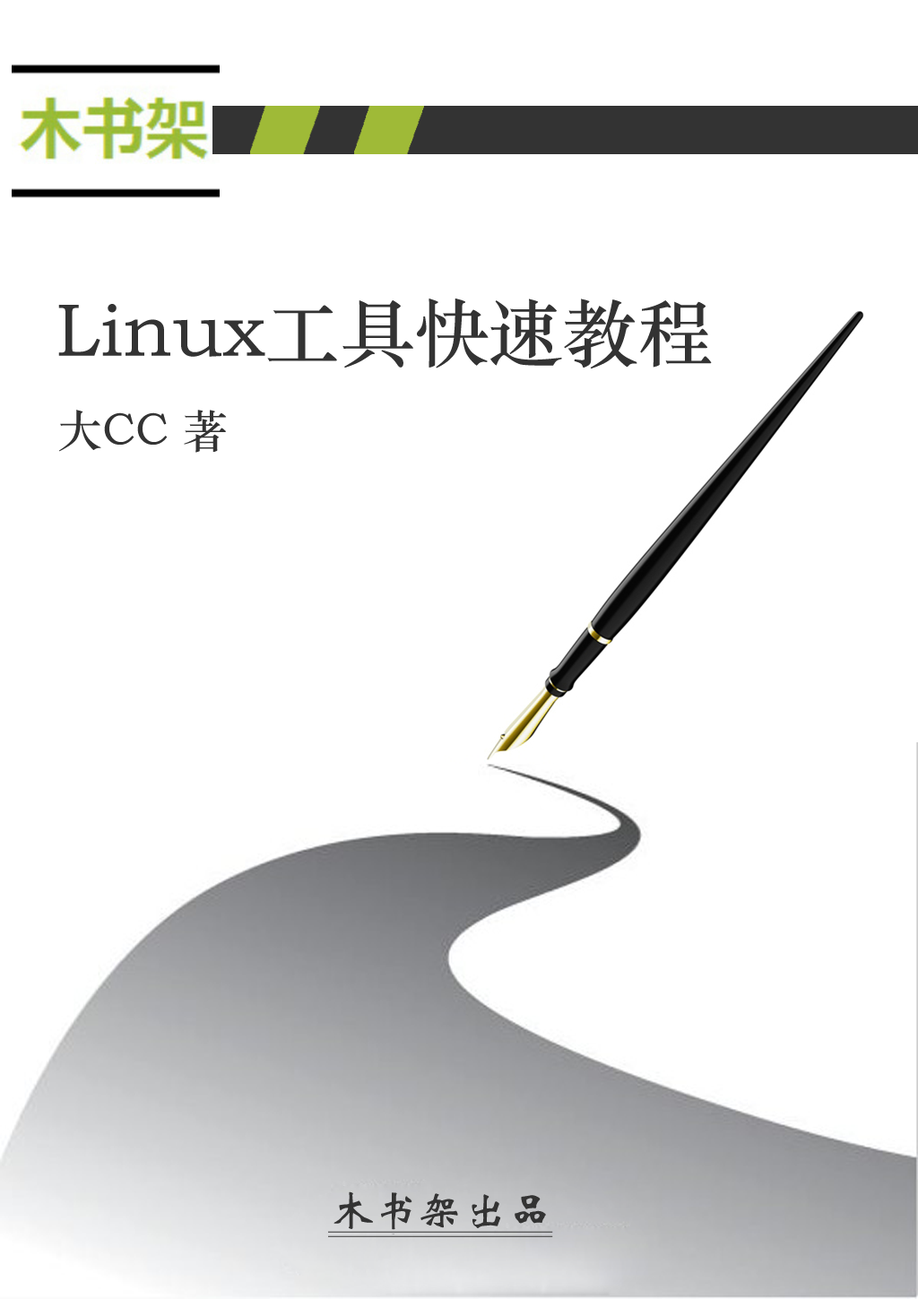
<style>
.page{position:relative;width:918px;height:1299px;background:#ffffff}
.page>*{position:absolute;margin:0}
.t1{font:74.7px "STZhongsong";color:#333333}
.t2{font:44.8px "STZhongsong";color:#333333}
.t3{font:44.8px "STXinwei";color:#333333;text-decoration:underline}
</style>
<div class="page">
<p class="t1" style="left:58px;top:299px;width:654px;height:70px">Linux工具快速教程</p>
<p class="t2" style="left:59px;top:410px;width:168px;height:43px">大CC 著</p>
<p class="t3" style="left:328px;top:1191px;width:225px;height:42px">木书架出品</p>
</div>
